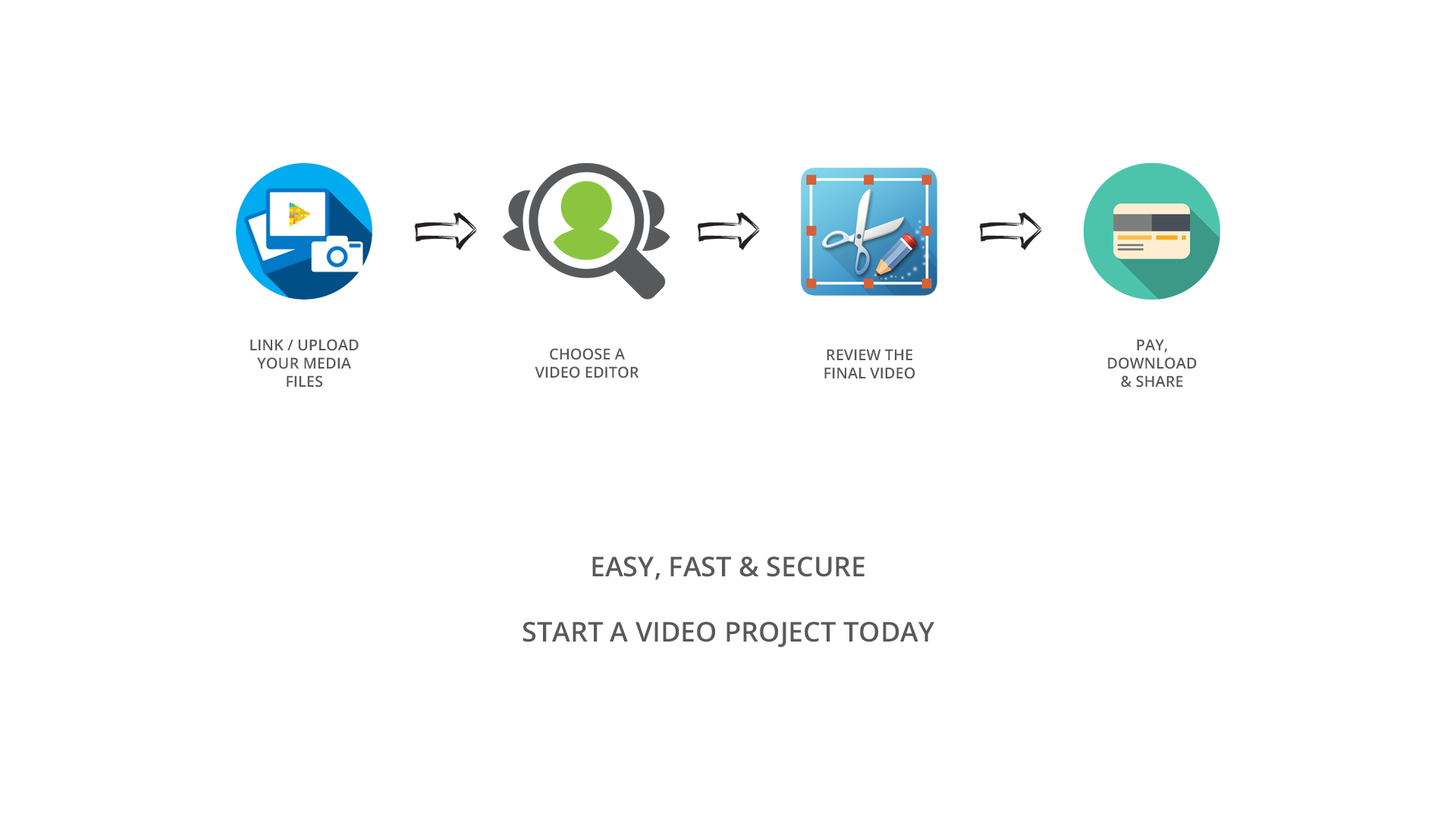
<style>
.page{position:relative;width:1456px;height:819px;background:#ffffff}
.page>*{position:absolute;margin:0}
.t1{font:15.2px "OpenSans-Semibold";color:#595959}
.t2{font:27.3px "OpenSans-Semibold";color:#595959}
</style>
<div class="page">
<p class="t1" style="left:250px;top:339px;width:109px;height:49px;text-align:center">LINK / UPLOAD<br>YOUR MEDIA<br>FILES</p>
<p class="t1" style="left:1108px;top:339px;width:89px;height:49px;text-align:center">PAY,<br>DOWNLOAD<br>&amp; SHARE</p>
<p class="t1" style="left:535px;top:348px;width:104px;height:30px;text-align:center">CHOOSE A<br>VIDEO EDITOR</p>
<p class="t1" style="left:824px;top:349px;width:91px;height:30px;text-align:center">REVIEW THE<br>FINAL VIDEO</p>
<p class="t2" style="left:522px;top:557px;width:413px;height:91px;text-align:center">EASY, FAST &amp; SECURE<br><br>START A VIDEO PROJECT TODAY</p>
</div>
